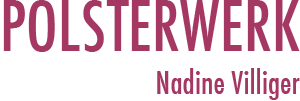
<style>
.page{position:relative;width:300px;height:101px;background:#ffffff}
.page>*{position:absolute;margin:0}
.t1{font:31.1px/43.5px "Futura-CondensedMedium";color:#a43863}
.t2{font:66.6px "Futura-CondensedMedium";color:#a43863}
</style>
<div class="page">
<p class="t1" style="left:3px;top:0px;width:297px;height:100px;text-align:right"><span class="t2">POLSTERWERK<br></span>Nadine Villiger</p>
</div>
